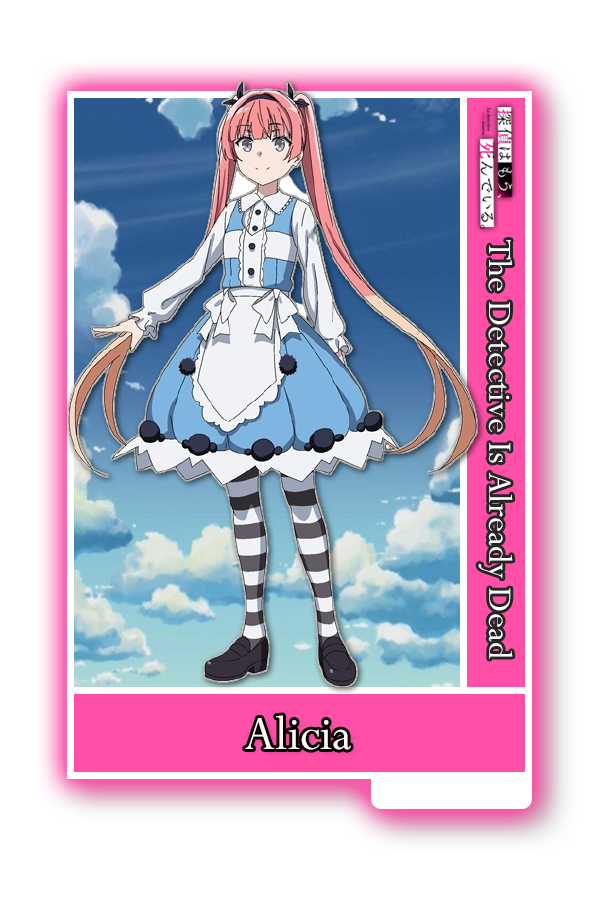
<style>
.page{position:relative;width:600px;height:900px;background:#ffffff}
.page>*{position:absolute;margin:0}
.t1{font:36.5px "Perpetua";color:#ffffff;scale:1.04 1}
.t2{font:53.2px "Perpetua";color:#fff5f5}
</style>
<div class="page">
<p class="t1" style="left:478px;top:240px;width:35px;height:419px;rotate:90deg">The Detective Is Already Dead</p>
<p class="t2" style="left:245px;top:715px;width:106px;height:35px">Alicia</p>
</div>
